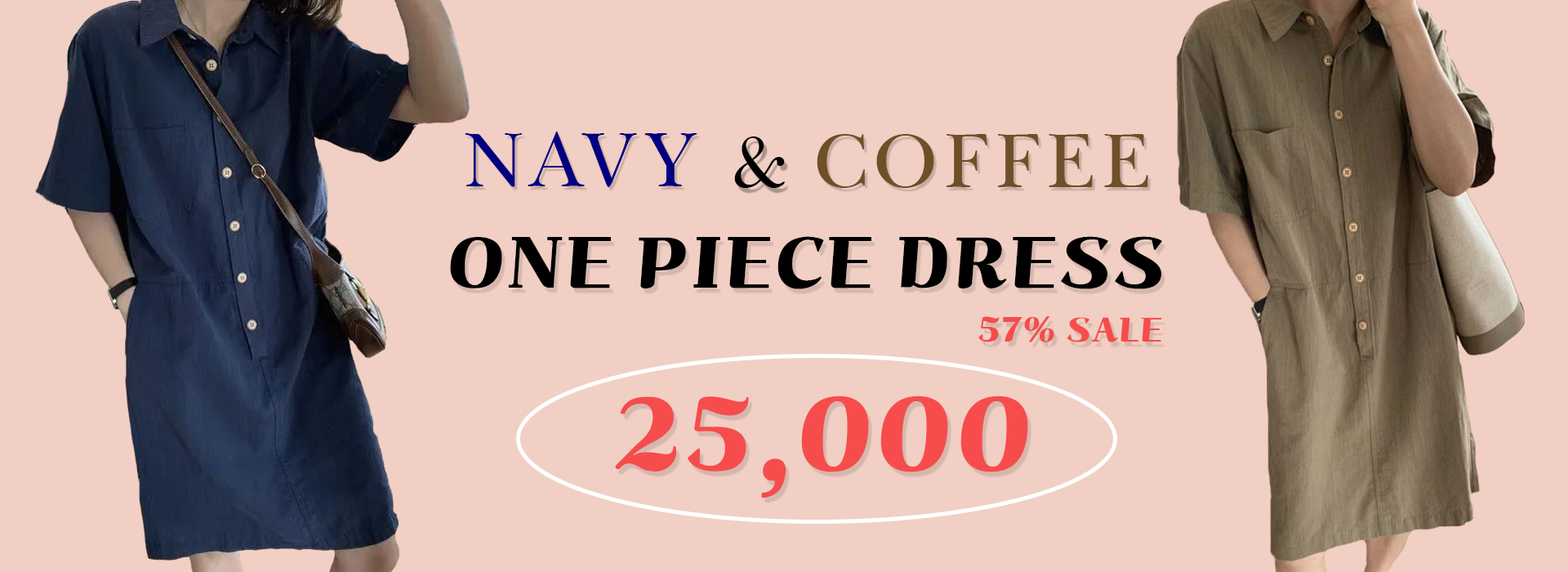
<style>
.page{position:relative;width:1568px;height:572px;background:#f1cfc4}
.page>*{position:absolute;margin:0}
.t1{font:78.3px "Baskerville-BT";letter-spacing:0.05em;color:#000080;text-transform:uppercase}
.t2{font:74.9px "Baskerville-BT";letter-spacing:0.05em;color:#000000;text-transform:uppercase}
.t3{font:78.3px "Baskerville-BT";letter-spacing:0.05em;color:#6f4f28;text-transform:uppercase}
.t4{font:71.5px "ghanachoco";letter-spacing:0.05em;color:#000000;text-transform:uppercase}
.t5{font:34px "ghanachoco";letter-spacing:0.05em;color:#f64c4c;text-transform:uppercase}
.t6{font:102.1px "ghanachoco";letter-spacing:0.05em;color:#f64c4c;text-transform:uppercase}
</style>
<div class="page">
<p class="t1" style="left:465px;top:131px;width:232px;height:56px">navy</p>
<p class="t2" style="left:734px;top:136px;width:51px;height:52px">&amp;</p>
<p class="t3" style="left:817px;top:134px;width:331px;height:54px"><span class="t1"><br></span>coffee</p>
<p class="t4" style="left:450px;top:236px;width:712px;height:53px">one piece dress</p>
<p class="t5" style="left:978px;top:316px;width:184px;height:26px">57% SALE</p>
<p class="t6" style="left:615px;top:395px;width:413px;height:103px">25,000</p>
</div>
